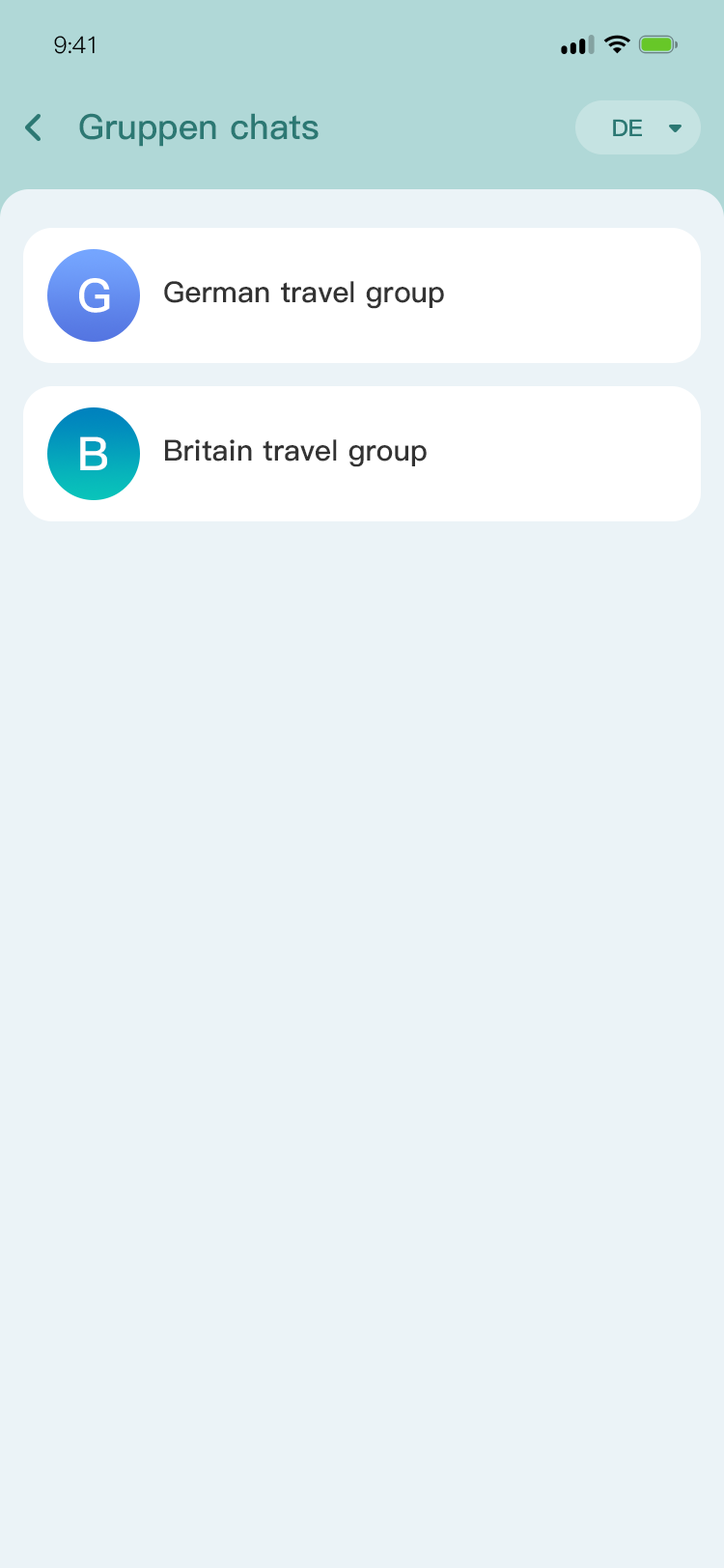
<style>
.page{position:relative;width:724px;height:1568px;background:#ebf3f7}
.page>*{position:absolute;margin:0}
.t1{font:23.2px "PingFang-SC-Regular";letter-spacing:-0.025em;color:#000000}
.t2{font:34.8px "PingFang-SC-Bold";color:#2c7873}
.t3{font:34.8px "PingFang-SC-Bold";color:#2c7873;text-transform:uppercase}
.t4{font:23.2px "PingFang-SC-Bold";color:#2c7873}
.t5{font:46.3px "PingFang-SC-Bold";color:#ffffff}
.t6{font:29px "PingFang-SC-Bold";color:#333333}
</style>
<div class="page">
<p class="t1" style="left:54px;top:36px;width:41px;height:18px">9:41</p>
<p class="t2" style="left:79px;top:113px;width:240px;height:34px"><span class="t3">G</span>ruppen chats</p>
<p class="t4" style="left:613px;top:119px;width:29px;height:17px">DE</p>
<p class="t5" style="left:79px;top:278px;width:31px;height:35px">G</p>
<p class="t6" style="left:164px;top:281px;width:280px;height:28px">German travel group</p>
<p class="t5" style="left:80px;top:436px;width:27px;height:34px">B</p>
<p class="t6" style="left:165px;top:439px;width:262px;height:28px">Britain travel group</p>
</div>
